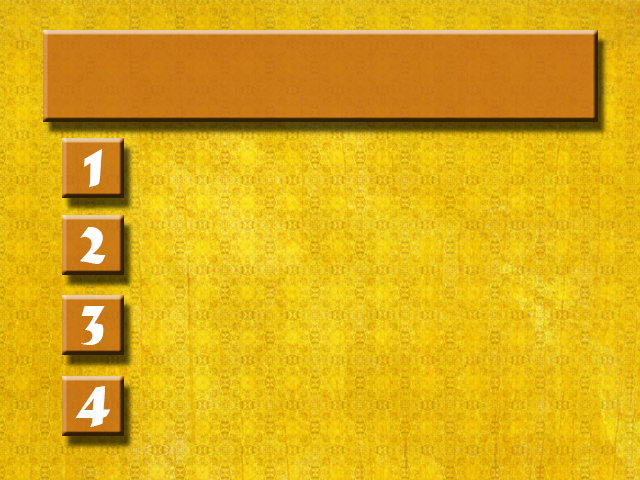
<style>
.page{position:relative;width:640px;height:480px}
.page>*{position:absolute;margin:0}
.t1{font:60px "MaturaMTScriptCapitals";color:#ffffff}
</style>
<div class="page">
<p class="t1" style="left:84px;top:149px;width:18px;height:38px">1</p>
<p class="t1" style="left:80px;top:227px;width:26px;height:37px">2</p>
<p class="t1" style="left:81px;top:306px;width:24px;height:39px">3</p>
<p class="t1" style="left:75px;top:386px;width:36px;height:41px">4</p>
</div>
